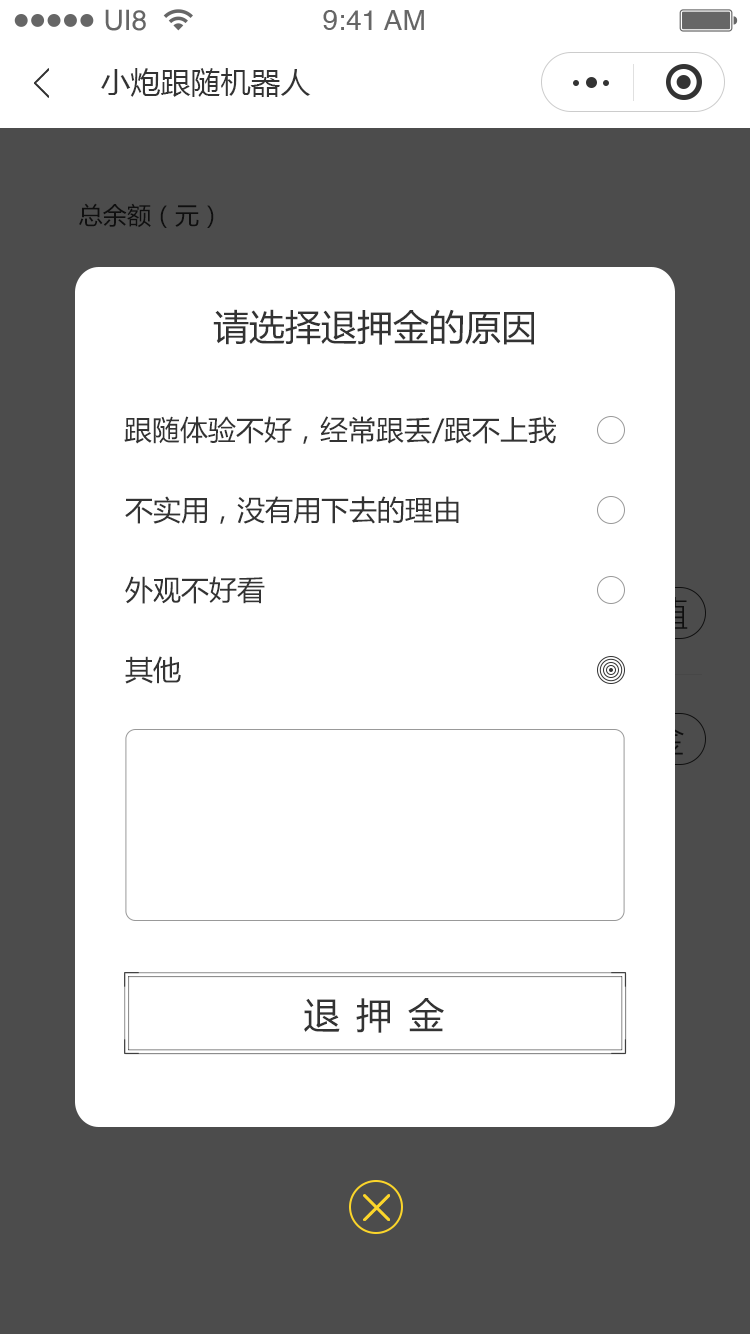
<style>
.page{position:relative;width:750px;height:1334px;background:#ffffff}
.page>*{position:absolute;margin:0}
.t1{font:28.1px "Helvetica";color:#666666}
.t2{font:30px "MicrosoftYaHei";color:#333333}
.t3{font:36px "MicrosoftYaHei";color:#333333}
.t4{font:28px "MicrosoftYaHei";color:#333333}
.t5{font:36px "MicrosoftYaHei";letter-spacing:0.44em;color:#333333}
</style>
<div class="page">
<p class="t1" style="left:105px;top:9px;width:41px;height:22px">UI8</p>
<p class="t1" style="left:323px;top:10px;width:101px;height:20px">9:41 AM</p>
<p class="t2" style="left:101px;top:68px;width:210px;height:29px">小炮跟随机器人</p>
<p class="t3" style="left:213px;top:309px;width:321px;height:36px">请选择退押金的原因</p>
<p class="t4" style="left:124px;top:416px;width:432px;height:28px">跟随体验不好，经常跟丢/跟不上我</p>
<p class="t4" style="left:125px;top:496px;width:334px;height:28px">不实用，没有用下去的理由</p>
<p class="t4" style="left:125px;top:576px;width:140px;height:28px">外观不好看</p>
<p class="t4" style="left:125px;top:656px;width:56px;height:28px">其他</p>
<p class="t5" style="left:304px;top:998px;width:140px;height:35px">退押金</p>
</div>
